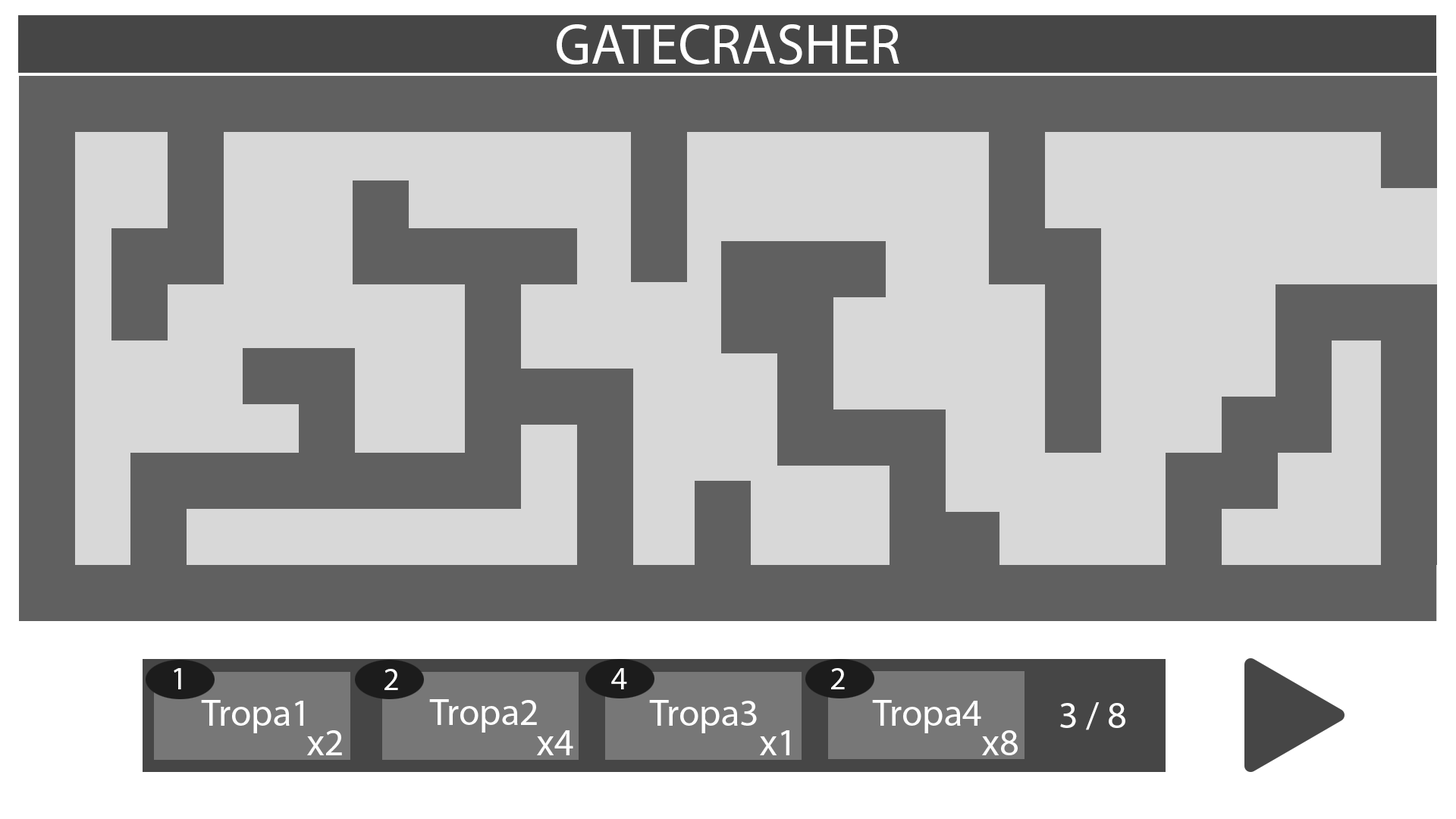
<style>
.page{position:relative;width:1456px;height:819px;background:#d8d8d8}
.page>*{position:absolute;margin:0}
.t1{font:56.9px "MyriadPro-Regular";color:#ffffff}
.t2{font:31.6px "MyriadPro-Regular";color:#ffffff}
.t3{font:37.9px "MyriadPro-Regular";color:#ffffff}
.t4{font:9.1px "MyriadPro-Regular";color:#ffffff}
</style>
<div class="page">
<p class="t1" style="left:557px;top:24px;width:342px;height:40px">GATECRASHER</p>
<p class="t2" style="left:174px;top:668px;width:7px;height:21px">1</p>
<p class="t2" style="left:384px;top:669px;width:14px;height:21px">2</p>
<p class="t2" style="left:611px;top:668px;width:16px;height:21px">4</p>
<p class="t2" style="left:831px;top:668px;width:14px;height:21px">2</p>
<p class="t3" style="left:201px;top:700px;width:102px;height:33px">Tropa1</p>
<p class="t3" style="left:429px;top:699px;width:108px;height:34px">Tropa2</p>
<p class="t3" style="left:649px;top:700px;width:108px;height:33px">Tropa3</p>
<p class="t3" style="left:872px;top:700px;width:109px;height:33px">Tropa4</p>
<p class="t4" style="left:1060px;top:702px;width:65px;height:28px">3 / 8</p>
<p class="t4" style="left:307px;top:730px;width:35px;height:25px">x2</p>
<p class="t4" style="left:537px;top:730px;width:36px;height:25px">x4</p>
<p class="t4" style="left:760px;top:730px;width:29px;height:25px">x1</p>
<p class="t4" style="left:982px;top:730px;width:36px;height:25px">x8</p>
</div>
